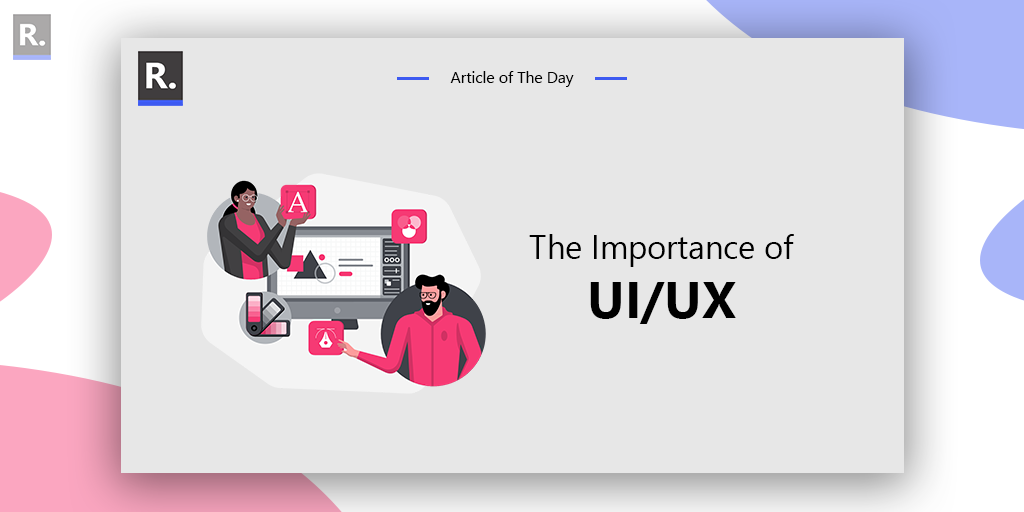
<style>
.page{position:relative;width:1024px;height:512px;background:#e7e7e7}
.page>*{position:absolute;margin:0}
.t1{font:15.7px "SegoeUI";color:#000000}
.t2{font:32.6px/59.3px "SegoeUI";color:#000000}
.t3{font:51.8px/59.3px "SegoeUI-Bold";color:#000000}
</style>
<div class="page">
<p class="t1" style="left:450px;top:71px;width:124px;height:16px">Article of The Day</p>
<p class="t2" style="left:529px;top:234px;width:265px;height:90px;text-align:center">The Importance of <br><span class="t3">UI/UX</span></p>
</div>
